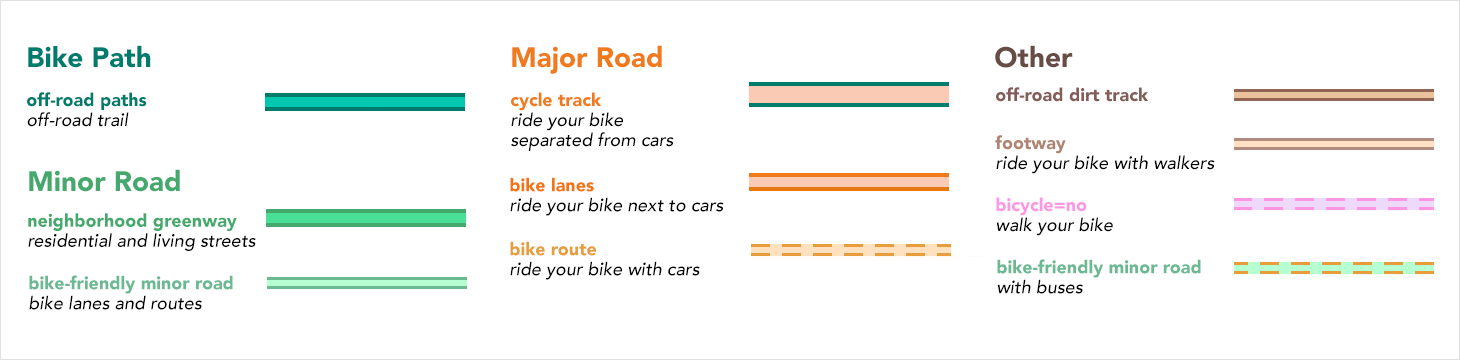
<style>
.page{position:relative;width:1460px;height:360px;background:#ffffff}
.page>*{position:absolute;margin:0}
.t1{font:28px "Avenir-Black";color:#007c6d}
.t2{font:28px "Avenir-Black";color:#f17b1c}
.t3{font:28px "Avenir-Black";color:#664b46}
.t4{font:18px "Avenir-Black";color:#845d59}
.t5{font:18px/20px "Avenir-Black";color:#007c6d}
.t6{font:18px/20px "Avenir-MediumOblique";color:#000000}
.t7{font:18px/20px "Avenir-Black";color:#f17b1c}
.t8{font:18px/20px "Avenir-Black";color:#ae8471}
.t9{font:28px "Avenir-Black";color:#45a96e}
.t10{font:18px/20px "Avenir-Black";color:#f47412}
.t11{font:18px/20px "Avenir-Black";color:#ff96e3}
.t12{font:18px/20px "Avenir-Black";color:#45a96e}
.t13{font:18px/20px "Avenir-Black";color:#e89d3c}
.t14{font:18px/20px "Avenir-Black";color:#6ab991}
</style>
<div class="page">
<p class="t1" style="left:28px;top:45px;width:123px;height:23px">Bike Path</p>
<p class="t2" style="left:512px;top:45px;width:150px;height:29px">Major Road</p>
<p class="t3" style="left:995px;top:45px;width:78px;height:23px">Other</p>
<p class="t4" style="left:996px;top:87px;width:153px;height:15px">off-road dirt track</p>
<p class="t5" style="left:27px;top:92px;width:120px;height:35px">off-road paths<br><span class="t6">off-road trail</span></p>
<p class="t6" style="left:511px;top:92px;width:163px;height:59px"><span class="t7">cycle track<br></span>ride your bike <br>separated from cars</p>
<p class="t6" style="left:995px;top:135px;width:220px;height:39px"><span class="t8">footway<br></span>ride your bike with walkers</p>
<p class="t9" style="left:29px;top:169px;width:151px;height:23px">Minor Road</p>
<p class="t6" style="left:510px;top:177px;width:214px;height:39px"><span class="t10">bike lanes<br></span>ride your bike next to cars</p>
<p class="t6" style="left:996px;top:197px;width:117px;height:39px"><span class="t11">bicycle=no<br></span>walk your bike</p>
<p class="t6" style="left:28px;top:213px;width:228px;height:38px"><span class="t12">neighborhood greenway<br></span>residential and living streets</p>
<p class="t6" style="left:510px;top:241px;width:190px;height:39px"><span class="t13">bike route<br></span>ride your bike with cars</p>
<p class="t14" style="left:997px;top:259px;width:204px;height:35px">bike-friendly minor road<br><span class="t6">with buses</span></p>
<p class="t14" style="left:29px;top:275px;width:204px;height:35px">bike-friendly minor road<br><span class="t6">bike lanes and routes</span></p>
</div>
